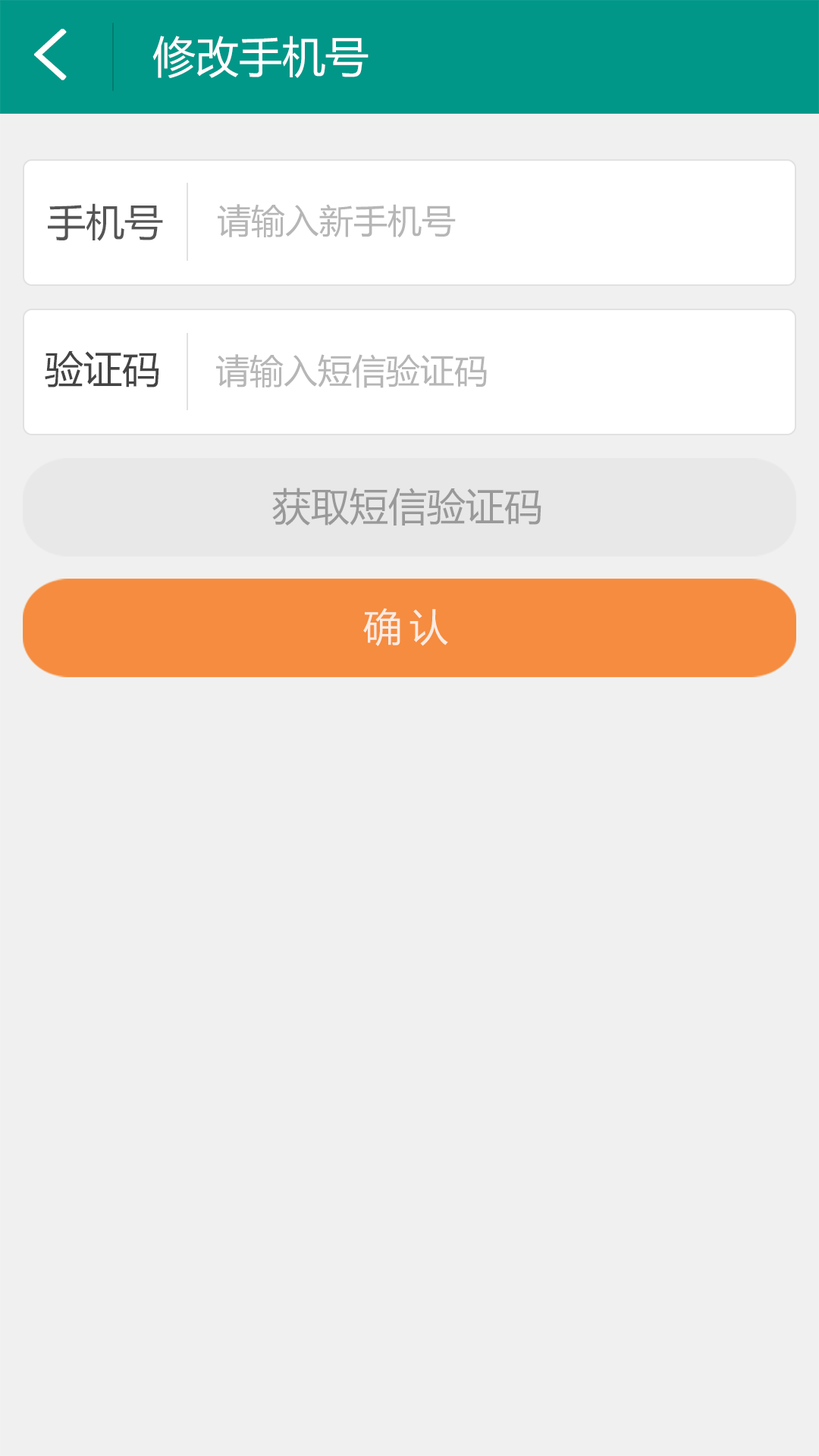
<style>
.page{position:relative;width:819px;height:1456px;background:#f0f0f0}
.page>*{position:absolute;margin:0}
.t1{font:70.5px "SimHei";color:#ffffff;font-weight:bold}
.t2{font:43.2px "MicrosoftYaHei";color:#ffffff}
.t3{font:38.7px "MicrosoftYaHei";color:#555555}
.t4{font:34.1px "MicrosoftYaHei";color:#b6b6b6}
.t5{font:38.7px "MicrosoftYaHei";color:#444444}
.t6{font:38.7px "MicrosoftYaHei";color:#999999}
.t7{font:38.7px "MicrosoftYaHei";letter-spacing:0.2em;color:#fdebe2}
</style>
<div class="page">
<p class="t1" style="left:34px;top:29px;width:33px;height:51px">&lt;</p>
<p class="t2" style="left:152px;top:36px;width:217px;height:42px">修改手机号</p>
<p class="t3" style="left:48px;top:203px;width:115px;height:38px">手机号</p>
<p class="t4" style="left:218px;top:204px;width:238px;height:34px">请输入新手机号</p>
<p class="t5" style="left:45px;top:351px;width:114px;height:37px">验证码</p>
<p class="t4" style="left:216px;top:354px;width:271px;height:34px">请输入短信验证码</p>
<p class="t6" style="left:272px;top:488px;width:269px;height:38px">获取短信验证码</p>
<p class="t7" style="left:363px;top:608px;width:85px;height:38px">确认</p>
</div>
